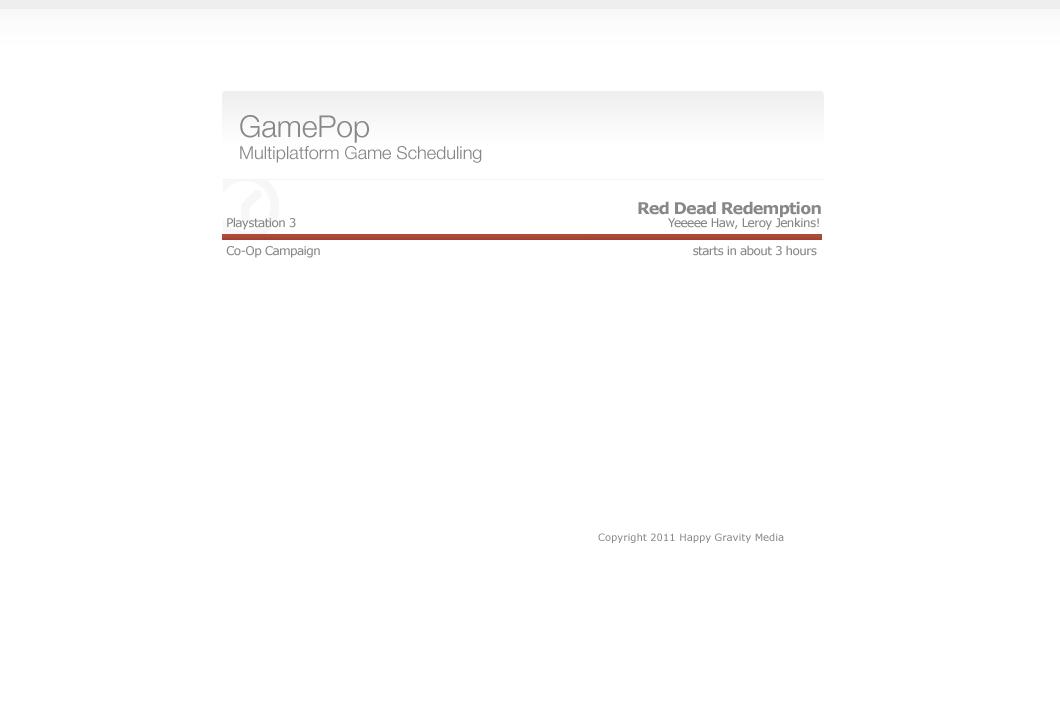
<style>
.page{position:relative;width:1060px;height:704px;background:#ffffff}
.page>*{position:absolute;margin:0}
.t1{font:30px "HelveticaNeue-Light";color:#888888}
.t2{font:18px "HelveticaNeue-Light";color:#888888}
.t3{font:16px "Verdana-Bold";letter-spacing:-0.05em;color:#888889}
.t4{font:12px "Verdana";letter-spacing:-0.05em;color:#888889}
.t5{font:10px "Verdana";color:#888888}
</style>
<div class="page">
<p class="t1" style="left:240px;top:115px;width:129px;height:28px">GamePop</p>
<p class="t2" style="left:240px;top:146px;width:242px;height:17px">Multiplatform Game Scheduling</p>
<p class="t3" style="left:638px;top:201px;width:183px;height:17px">Red Dead Redemption</p>
<p class="t4" style="left:227px;top:217px;width:69px;height:13px">Playstation 3</p>
<p class="t4" style="left:668px;top:217px;width:151px;height:13px">Yeeeee Haw, Leroy Jenkins!</p>
<p class="t4" style="left:226px;top:246px;width:94px;height:12px">Co-Op Campaign</p>
<p class="t4" style="left:693px;top:245px;width:124px;height:11px">starts in about 3 hours</p>
<p class="t5" style="left:598px;top:533px;width:186px;height:10px">Copyright 2011 Happy Gravity Media</p>
</div>
